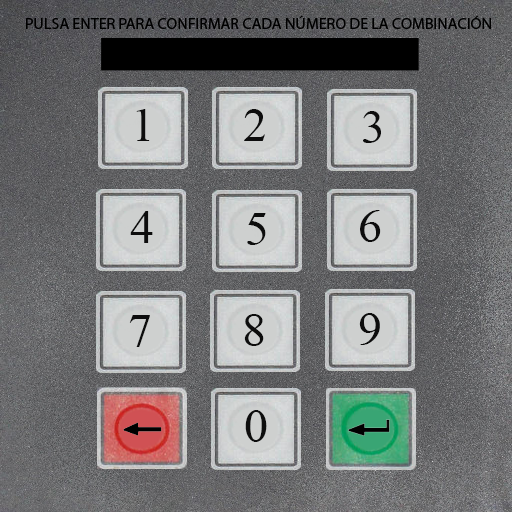
<style>
.page{position:relative;width:512px;height:512px}
.page>*{position:absolute;margin:0}
.t1{font:16px "MyriadPro-Regular";color:#000000}
</style>
<div class="page">
<p class="t1" style="left:26px;top:15px;width:465px;height:15px">PULSA ENTER PARA CONFIRMAR CADA NÚMERO DE LA COMBINACIÓN</p>
</div>
